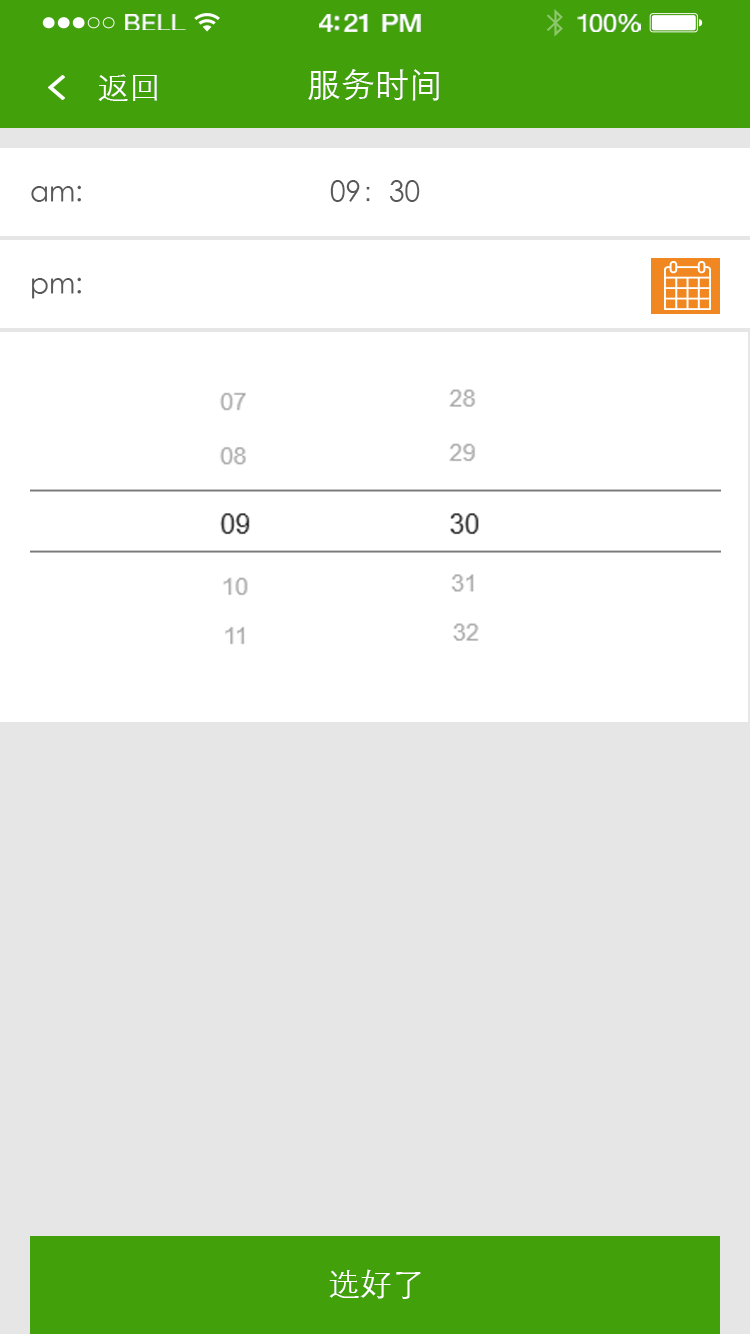
<style>
.page{position:relative;width:750px;height:1334px;background:#e6e6e6}
.page>*{position:absolute;margin:0}
.t1{font:23.3px "HelveticaNeue";letter-spacing:0.02em;color:#ffffff;scale:1.06 1}
.t2{font:25.3px "HelveticaNeue-Medium";letter-spacing:-0.02em;color:#ffffff;scale:1.06 1}
.t3{font:24.3px "HelveticaNeue";letter-spacing:-0.02em;color:#ffffff;scale:1.06 1}
.t4{font:32px "STXihei";color:#ffffff}
.t5{font:34px "STXihei";color:#ffffff}
.t6{font:28px "STXihei";color:#595757}
</style>
<div class="page">
<p class="t1" style="left:125px;top:14px;width:61px;height:16px">BELL</p>
<p class="t2" style="left:319px;top:14px;width:102px;height:18px">4:21 PM</p>
<p class="t3" style="left:577px;top:14px;width:64px;height:18px">100%</p>
<p class="t4" style="left:98px;top:74px;width:59px;height:27px">返回</p>
<p class="t5" style="left:308px;top:69px;width:131px;height:32px">服务时间</p>
<p class="t6" style="left:31px;top:185px;width:50px;height:17px">am:</p>
<p class="t6" style="left:330px;top:180px;width:90px;height:22px">09：30</p>
<p class="t6" style="left:32px;top:277px;width:49px;height:22px">pm:</p>
<p class="t4" style="left:329px;top:1269px;width:92px;height:30px">选好了</p>
</div>
